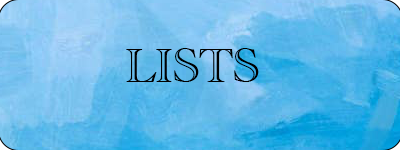
<style>
.page{position:relative;width:400px;height:150px}
.page>*{position:absolute;margin:0}
.t1{font:50px "AcademyEngravedLetPlain";color:#000000}
</style>
<div class="page">
<p class="t1" style="left:126px;top:48px;width:133px;height:34px">LISTS</p>
</div>
